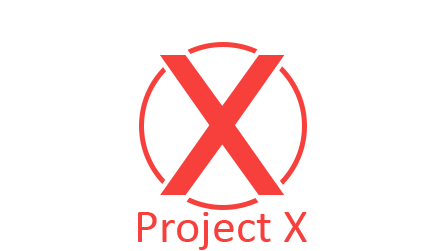
<style>
.page{position:relative;width:445px;height:251px;background:#ffffff}
.page>*{position:absolute;margin:0}
.t1{font:229px "Paz-Bold";color:#f7403c}
.t2{font:48px "Calibri";color:#f7403c}
</style>
<div class="page">
<p class="t1" style="left:160px;top:55px;width:125px;height:140px">X</p>
<p class="t2" style="left:138px;top:212px;width:169px;height:38px">Project X</p>
</div>
